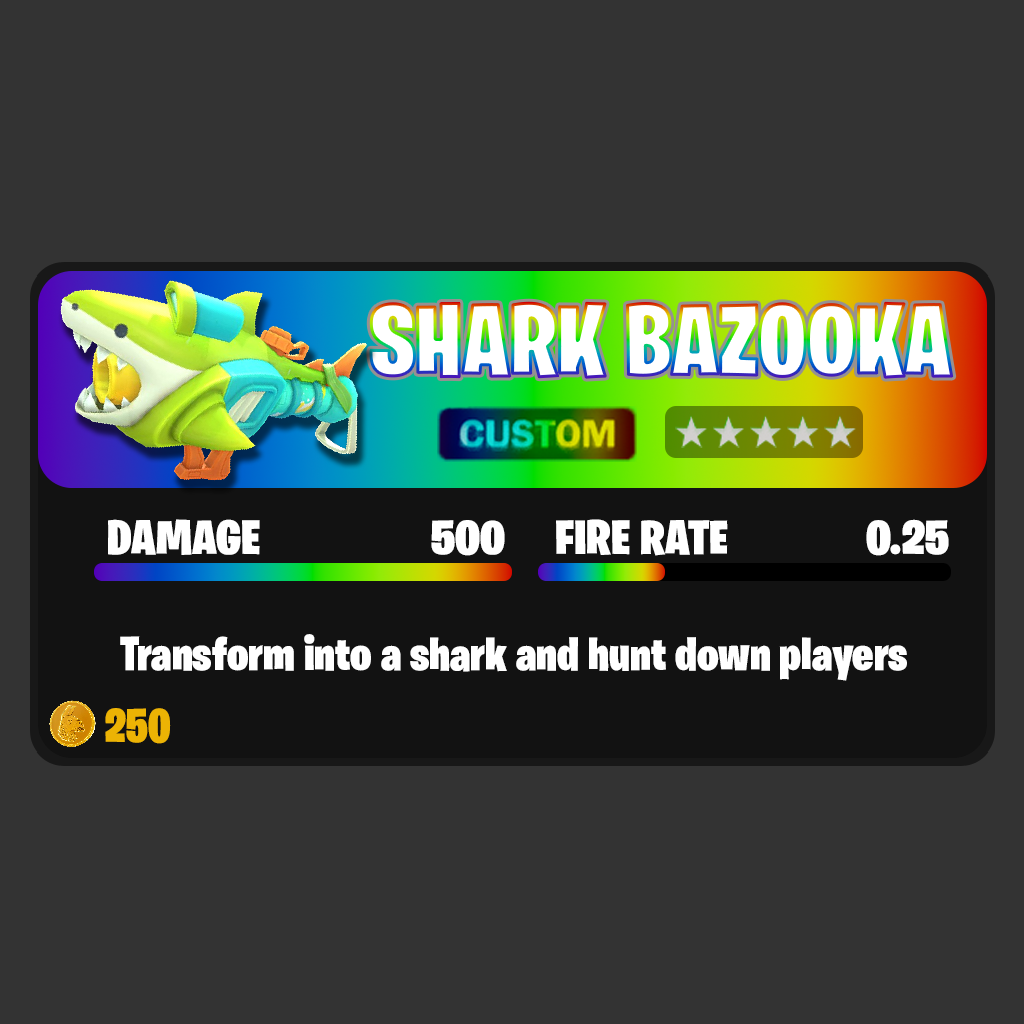
<style>
.page{position:relative;width:1024px;height:1024px;background:#333333}
.page>*{position:absolute;margin:0}
.t1{font:100.8px "BurbankBigCondensed-Black";color:#ffffff}
.t2{font:48.4px "BurbankBigCondensed-Black";color:#ffffff;scale:1.1 1}
.t3{font:48.3px "BurbankBigCondensed-Black";color:#ffffff;scale:1.1 1}
.t4{font:48px "BurbankBigCondensed-Black";color:#ffffff}
.t5{font:48px "BurbankBigCondensed-Black";color:#ecb304}
</style>
<div class="page">
<p class="t1" style="left:370px;top:302px;width:583px;height:76px">SHARK BAZOOKA</p>
<p class="t2" style="left:108px;top:519px;width:152px;height:36px">DAMAGE</p>
<p class="t2" style="left:431px;top:520px;width:74px;height:36px">500</p>
<p class="t3" style="left:556px;top:519px;width:172px;height:37px">FIRE RATE</p>
<p class="t3" style="left:866px;top:519px;width:83px;height:37px">0.25</p>
<p class="t4" style="left:120px;top:634px;width:787px;height:47px">Transform into a shark and hunt down players</p>
<p class="t5" style="left:105px;top:708px;width:66px;height:36px">250</p>
</div>
